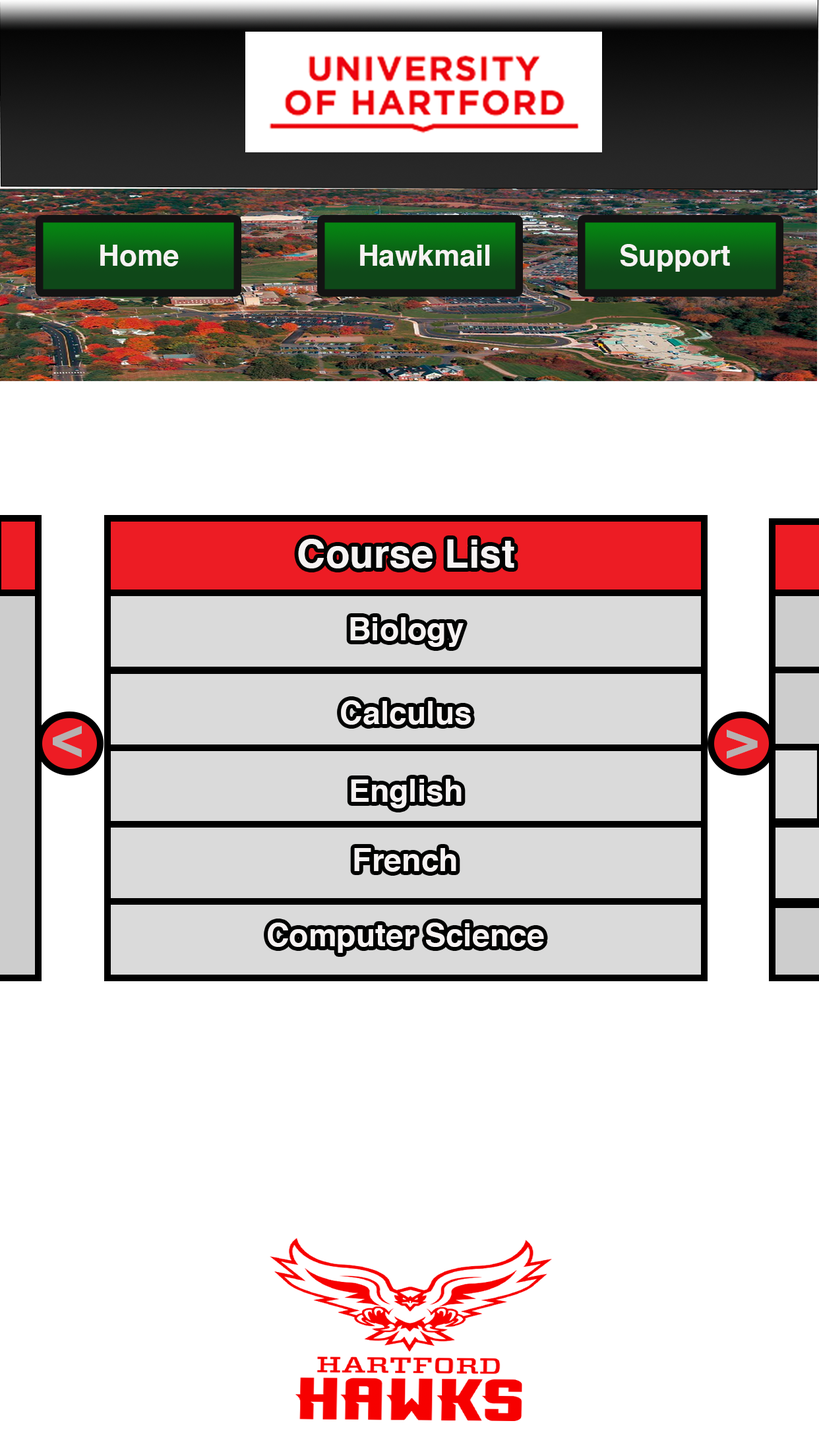
<style>
.page{position:relative;width:819px;height:1456px;background:#ffffff}
.page>*{position:absolute;margin:0}
.t1{font:29px "Helvetica-Bold";color:#f6f2f2}
.t2{font:39.6px "Helvetica-Bold";color:#f6f2f2}
.t3{font:31.7px "Helvetica-Bold";color:#f6f2f2}
.t4{font:56.4px "Helvetica-Bold";color:#b7b1b1;scale:0.89 1}
.t5{font:53.5px "Helvetica-Bold";color:#b7b1b1}
</style>
<div class="page">
<p class="t1" style="left:100px;top:245px;width:79px;height:21px">Home</p>
<p class="t1" style="left:360px;top:245px;width:130px;height:21px">Hawkmail</p>
<p class="t1" style="left:620px;top:244px;width:110px;height:28px">Support</p>
<p class="t2" style="left:298px;top:539px;width:216px;height:29px">Course List</p>
<p class="t3" style="left:350px;top:617px;width:114px;height:30px">Biology</p>
<p class="t3" style="left:341px;top:700px;width:130px;height:25px">Calculus</p>
<p class="t4" style="left:53px;top:725px;width:29px;height:33px;rotate:-179deg">&gt;</p>
<p class="t5" style="left:727px;top:729px;width:31px;height:30px">&gt;</p>
<p class="t3" style="left:351px;top:779px;width:111px;height:29px">English</p>
<p class="t3" style="left:354px;top:848px;width:102px;height:24px">French</p>
<p class="t3" style="left:268px;top:923px;width:276px;height:30px">Computer Science</p>
</div>
